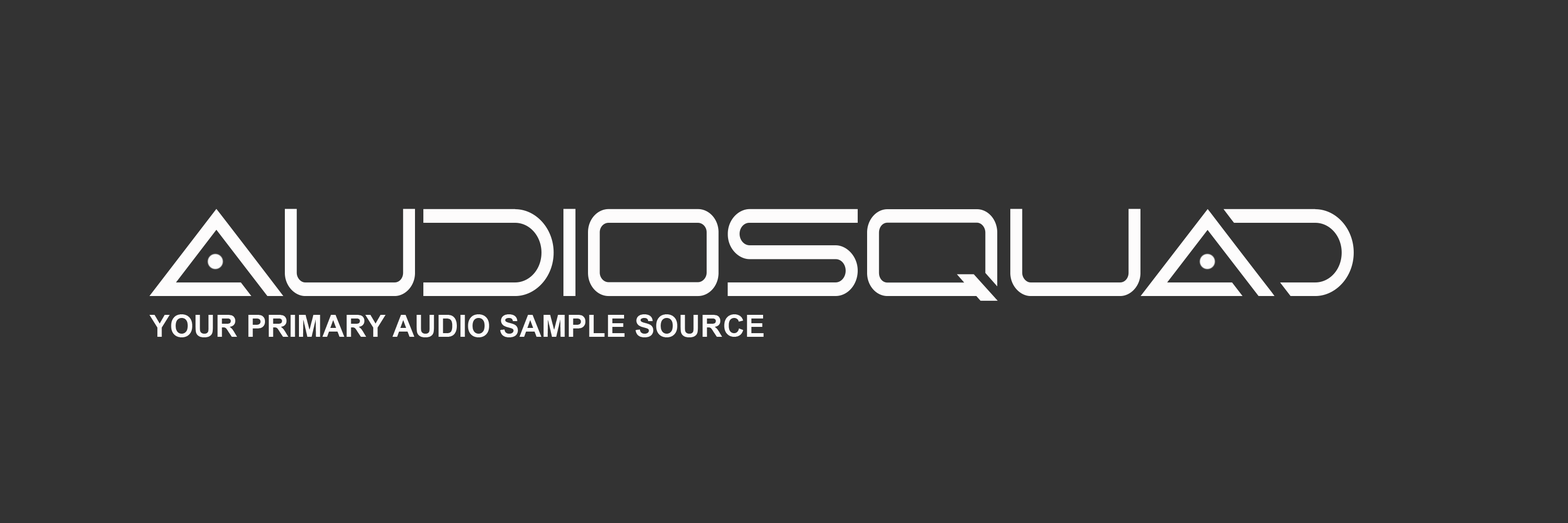
<style>
.page{position:relative;width:1568px;height:523px;background:#333333}
.page>*{position:absolute;margin:0}
.t1{font:30.5px "Arial-BoldMT";color:#fdfcfc}
</style>
<div class="page">
<p class="t1" style="left:149px;top:314px;width:615px;height:23px">YOUR PRIMARY AUDIO SAMPLE SOURCE</p>
</div>
